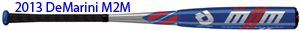
<style>
.page{position:relative;width:300px;height:31px;background:#ffffff}
.page>*{position:absolute;margin:0}
.t1{font:14px "MyriadPro-Regular";color:#0000ff}
</style>
<div class="page">
<p class="t1" style="left:15px;top:2px;width:115px;height:10px">2013 DeMarini M2M</p>
</div>
